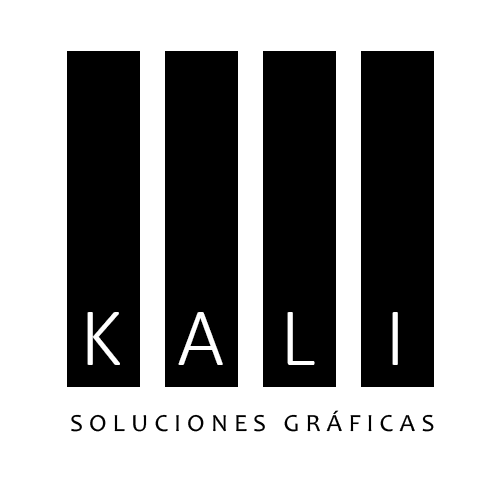
<style>
.page{position:relative;width:500px;height:500px;background:#ffffff}
.page>*{position:absolute;margin:0}
.t1{font:83.9px "Calibri-Light";letter-spacing:0.1em;color:#ffffff}
.t2{font:24.8px "Candara";letter-spacing:0.24em;color:#000000}
</style>
<div class="page">
<p class="t1" style="left:87px;top:312px;width:33px;height:53px">K</p>
<p class="t1" style="left:178px;top:312px;width:45px;height:53px">A</p>
<p class="t1" style="left:287px;top:312px;width:28px;height:53px">L</p>
<p class="t1" style="left:392px;top:312px;width:6px;height:53px">I</p>
<p class="t2" style="left:71px;top:410px;width:363px;height:22px">SOLUCIONES GRÁFICAS</p>
</div>
